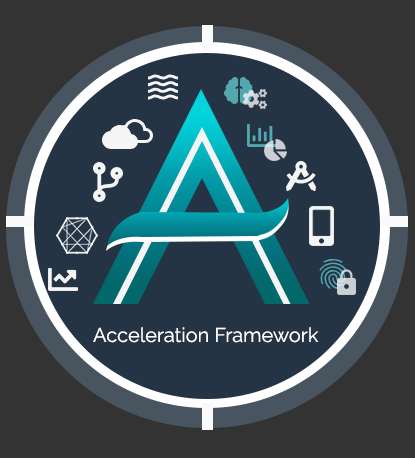
<style>
.page{position:relative;width:415px;height:458px;background:#243444}
.page>*{position:absolute;margin:0}
.t1{font:20px "Raleway-Regular";color:#ffffff}
</style>
<div class="page">
<p class="t1" style="left:93px;top:327px;width:226px;height:16px">Acceleration Framework</p>
</div>
